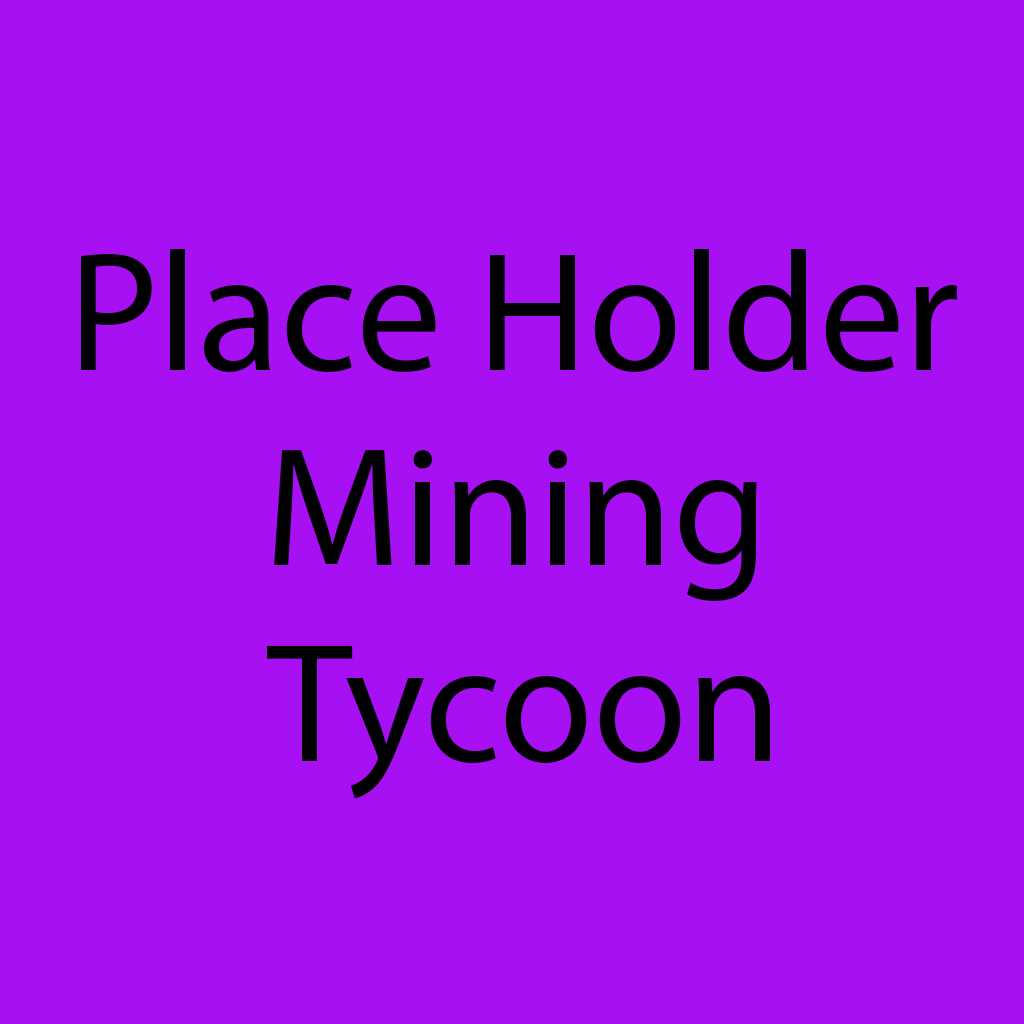
<style>
.page{position:relative;width:1024px;height:1024px;background:#a810f4}
.page>*{position:absolute;margin:0}
.t1{font:170.7px "MyriadPro-Regular";color:#000000}
</style>
<div class="page">
<p class="t1" style="left:81px;top:249px;width:876px;height:123px">Place Holder</p>
<p class="t1" style="left:274px;top:450px;width:483px;height:151px">Mining</p>
<p class="t1" style="left:267px;top:645px;width:503px;height:154px">Tycoon</p>
</div>
